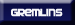
<style>
.page{position:relative;width:75px;height:25px}
.page>*{position:absolute;margin:0}
.t1{font:11px "SFAutomatonCondensed";color:#f6f6f9;font-weight:bold}
</style>
<div class="page">
<p class="t1" style="left:11px;top:8px;width:52px;height:9px">Gremlins</p>
</div>
